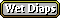
<style>
.page{position:relative;width:60px;height:18px;background:#000000}
.page>*{position:absolute;margin:0}
.t1{font:12px "Calibri-Bold";color:#ffffff}
.t2{font:12px "Calibri-Bold"}
</style>
<div class="page">
<p class="t1" style="left:5px;top:3px;width:50px;height:11px">Wet Diaps</p>
<p class="t2" style="left:6px;top:4px;width:50px;height:11px">Wet Diaps</p>
</div>
